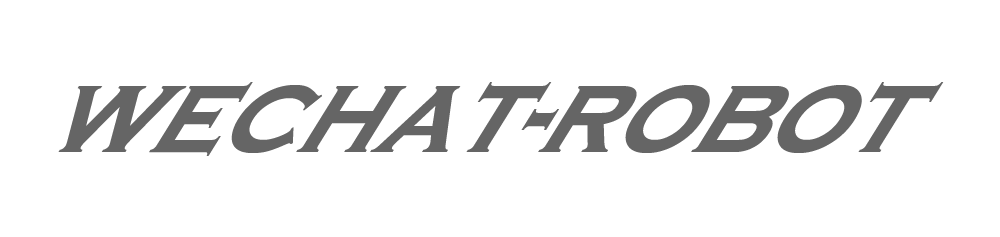
<style>
.page{position:relative;width:1000px;height:237px;background:#ffffff}
.page>*{position:absolute;margin:0}
.t1{font:142.8px "CopperplateGothic-Bold";color:#656565;scale:0.77 1}
</style>
<div class="page">
<p class="t1" style="left:58px;top:82px;width:886px;height:74px">wechat-robot</p>
</div>
